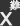
<style>
.page{position:relative;width:20px;height:26px;background:#333333}
.page>*{position:absolute;margin:0}
.t1{font:12px "DFKaiShu-SB-Estd-BF";color:#ececec;font-weight:bold}
.t2{font:18px "ArialMT";color:#ececec;font-weight:bold}
</style>
<div class="page">
<p class="t1" style="left:9px;top:0px;width:12px;height:11px">難</p>
<p class="t2" style="left:0px;top:12px;width:13px;height:14px">X</p>
</div>
